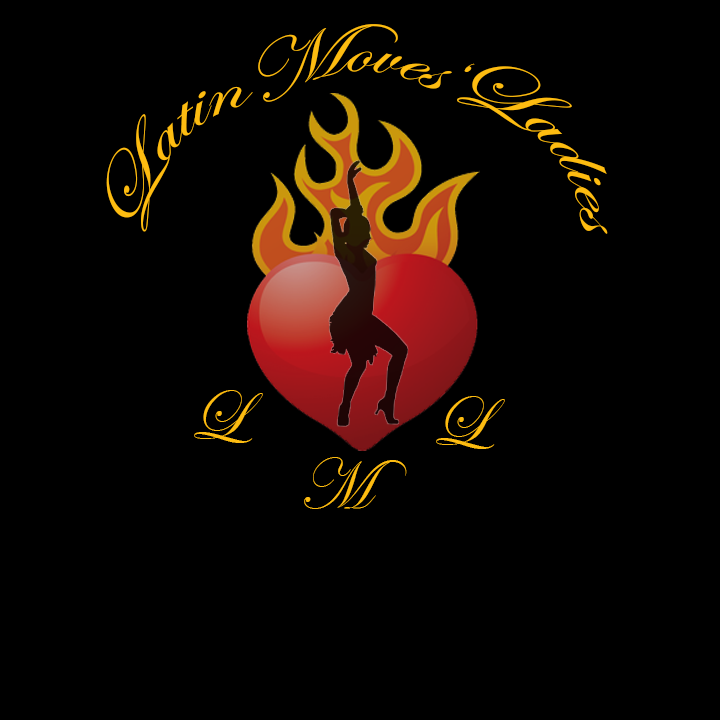
<style>
.page{position:relative;width:720px;height:720px;background:#000000}
.page>*{position:absolute;margin:0}
.t1{font:72.1px "EdwardianScriptITC";color:#fdbc11}
.t2{font:72.2px "EdwardianScriptITC";color:#fdbc11}
.t3{font:72px "EdwardianScriptITC";color:#fdbc11}
</style>
<div class="page">
<p class="t1" style="left:258px;top:24px;width:194px;height:78px;rotate:-5deg">Moves</p>
<p class="t2" style="left:464px;top:63px;width:11px;height:9px;rotate:14deg">‘</p>
<p class="t2" style="left:457px;top:66px;width:151px;height:168px;rotate:44deg">Ladies</p>
<p class="t2" style="left:106px;top:86px;width:147px;height:146px;rotate:-52deg">Latin</p>
<p class="t3" style="left:194px;top:390px;width:69px;height:53px">L</p>
<p class="t3" style="left:436px;top:396px;width:69px;height:53px">L</p>
<p class="t3" style="left:304px;top:457px;width:103px;height:52px">M</p>
</div>
